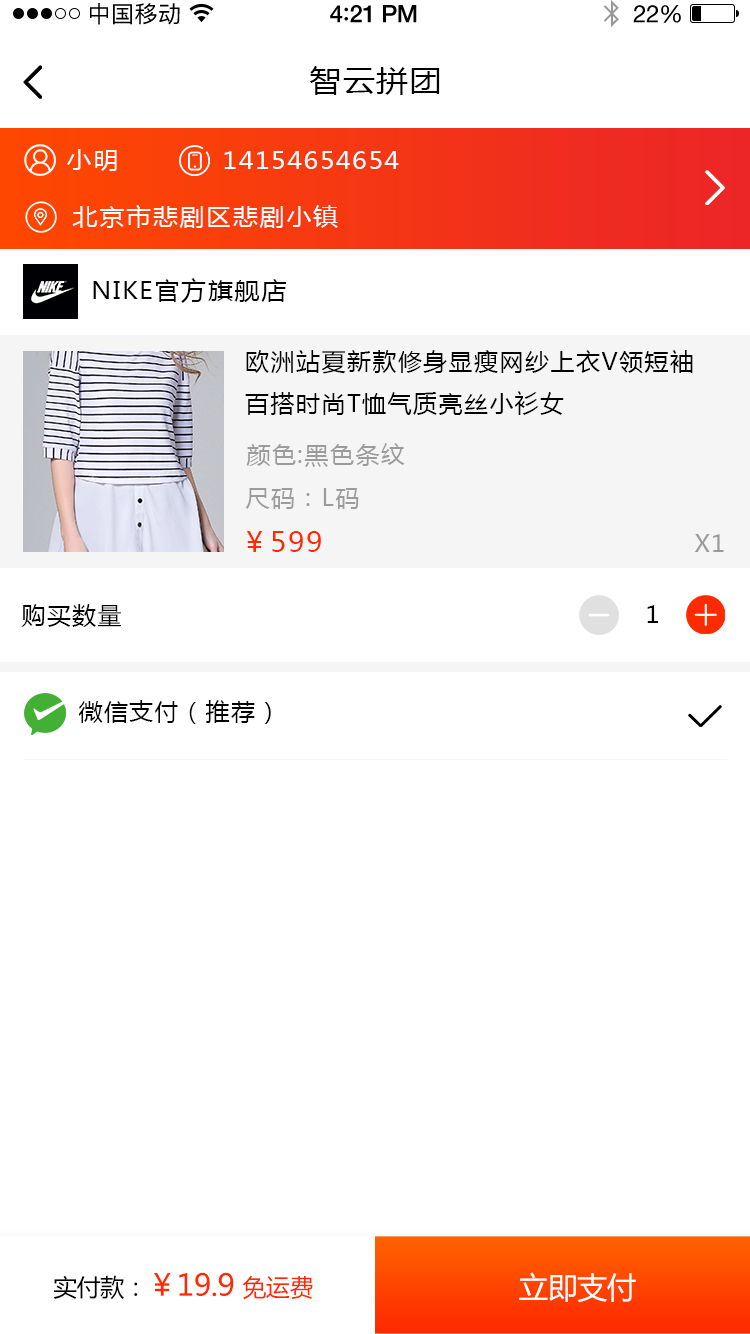
<style>
.page{position:relative;width:750px;height:1334px;background:#ffffff}
.page>*{position:absolute;margin:0}
.t1{font:23px "PingFangSC-Regular";letter-spacing:0.02em;color:#000000}
.t2{font:24px "HelveticaNeue-Medium";letter-spacing:-0.02em;color:#000000}
.t3{font:26px "Avenir-Medium";letter-spacing:-0.02em;color:#000000}
.t4{font:24px "HelveticaNeue";letter-spacing:-0.02em;color:#000000}
.t5{font:30px "MicrosoftYaHei";letter-spacing:0.05em;color:#000000;scale:1.06 1}
.t6{font:24px "MicrosoftYaHei";letter-spacing:0.05em;color:#ffffff;scale:1.06 1}
.t7{font:24px "MicrosoftYaHei";letter-spacing:0.05em;color:#000000;scale:1.06 1}
.t8{font:24px "MicrosoftYaHei";letter-spacing:0.06em;color:#000000;text-transform:uppercase}
.t9{font:24px "MicrosoftYaHei";letter-spacing:0.06em;color:#9b9b9b;text-transform:uppercase}
.t10{font:28px "MicrosoftYaHei";letter-spacing:0.06em;color:#ff2a00;text-transform:uppercase}
.t11{font:30px "MicrosoftYaHei";letter-spacing:-0.02em;color:#ff2a00}
.t12{font:24px "MicrosoftYaHei";letter-spacing:-0.02em;color:#000000}
.t13{font:24px "MicrosoftYaHei";letter-spacing:-0.02em;color:#ff2a00}
.t14{font:30px "MicrosoftYaHei";letter-spacing:-0.02em;color:#ffffff}
</style>
<div class="page">
<p class="t1" style="left:90px;top:3px;width:90px;height:22px">中国移动</p>
<p class="t2" style="left:330px;top:5px;width:87px;height:18px">4<span class="t3">:</span>21 PM</p>
<p class="t4" style="left:633px;top:5px;width:48px;height:18px">22%</p>
<p class="t5" style="left:309px;top:66px;width:131px;height:29px">智云拼团</p>
<p class="t6" style="left:67px;top:149px;width:50px;height:22px">小明</p>
<p class="t6" style="left:224px;top:151px;width:175px;height:18px">14154654654</p>
<p class="t6" style="left:72px;top:205px;width:266px;height:23px">北京市悲剧区悲剧小镇</p>
<p class="t7" style="left:93px;top:278px;width:193px;height:25px">NIKE官方旗舰店</p>
<p class="t8" style="left:245px;top:350px;width:448px;height:65px">欧洲站夏新款修身显瘦网纱上衣v领短袖百搭时尚t恤气质亮丝小衫女</p>
<p class="t9" style="left:246px;top:443px;width:159px;height:24px">颜色:黑色条纹</p>
<p class="t9" style="left:245px;top:488px;width:114px;height:21px">尺码：L码</p>
<p class="t10" style="left:246px;top:531px;width:75px;height:21px">￥599</p>
<p class="t9" style="left:694px;top:534px;width:30px;height:18px">x1</p>
<p class="t8" style="left:21px;top:604px;width:100px;height:23px">购买数量</p>
<p class="t8" style="left:647px;top:605px;width:12px;height:18px">1</p>
<p class="t8" style="left:78px;top:700px;width:193px;height:24px">微信支付（推荐）</p>
<p class="t11" style="left:53px;top:1272px;width:260px;height:28px"><span class="t12">实付款：</span>￥19.9 <span class="t13">免运费</span></p>
<p class="t14" style="left:519px;top:1272px;width:117px;height:31px">立即支付</p>
</div>
